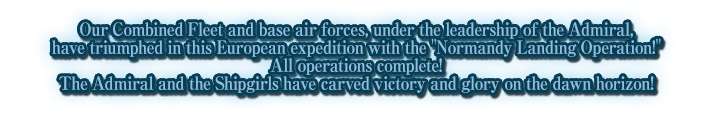
<style>
.page{position:relative;width:714px;height:115px;background:#ffffff}
.page>*{position:absolute;margin:0}
.t1{font:18px/18px "RyuminPro-ExBold";letter-spacing:-0.04em;color:#93bee0;scale:0.9 1}
</style>
<div class="page">
<p class="t1" style="left:52px;top:22px;width:609px;height:71px;text-align:center">Our Combined Fleet and base air forces, under the leadership of the Admiral,<br>have triumphed in this European expedition with the "Normandy Landing Operation!"<br>All operations complete!<br>The Admiral and the Shipgirls have carved victory and glory on the dawn horizon!</p>
</div>
